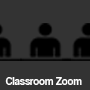
<style>
.page{position:relative;width:90px;height:90px;background:#333333}
.page>*{position:absolute;margin:0}
.t1{font:11px "CoolveticaRg-Regular";color:#ffffff}
</style>
<div class="page">
<p class="t1" style="left:5px;top:77px;width:77px;height:8px">Classroom Zoom</p>
</div>
